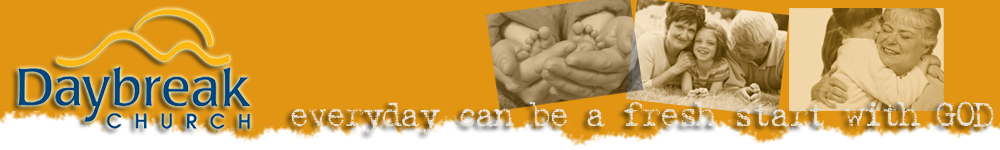
<style>
.page{position:relative;width:1000px;height:150px;background:#e19513}
.page>*{position:absolute;margin:0}
.t1{font:34.8px "BatikRegular";letter-spacing:-0.075em;color:#e8e4dd}
</style>
<div class="page">
<p class="t1" style="left:291px;top:101px;width:704px;height:33px">everyday can be a fresh start with GOD</p>
</div>
